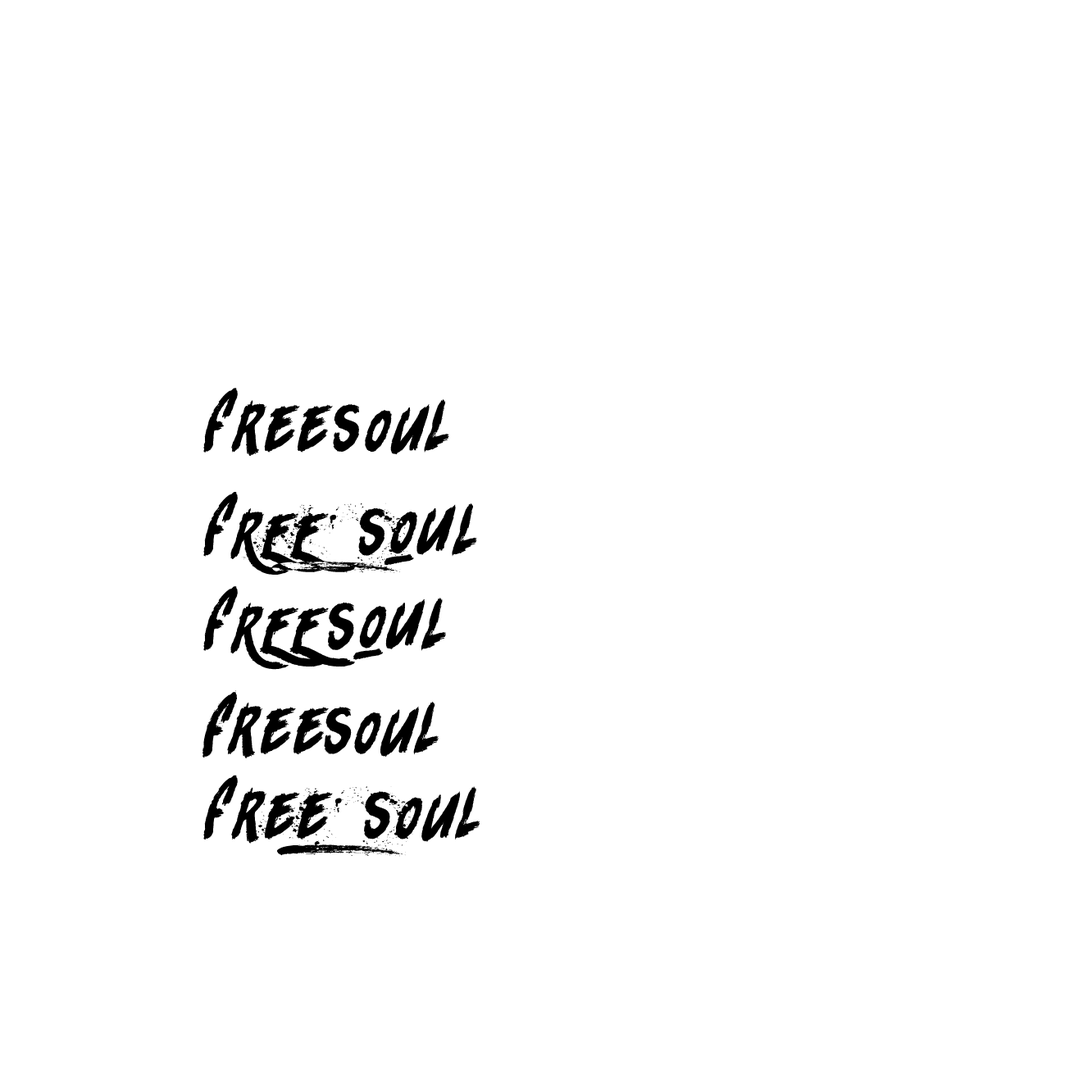
<style>
.page{position:relative;width:1092px;height:1092px;background:#ffffff}
.page>*{position:absolute;margin:0}
.t1{font:59px/9.4px "Rhinos-rocks";letter-spacing:0.1em;color:#000000}
</style>
<div class="page">
<p class="t1" style="left:202px;top:388px;width:278px;height:469px">FreeSoul<br><br><br><br><br><br><br><br><br><br><br>FREE SOUL<br><br><br><br><br><br><br><br><br><br>FREESOUL<br><br><br><br><br><br><br><br><br><br><br>freesoul<br><br><br><br><br><br><br><br><br>Free Soul</p>
</div>
